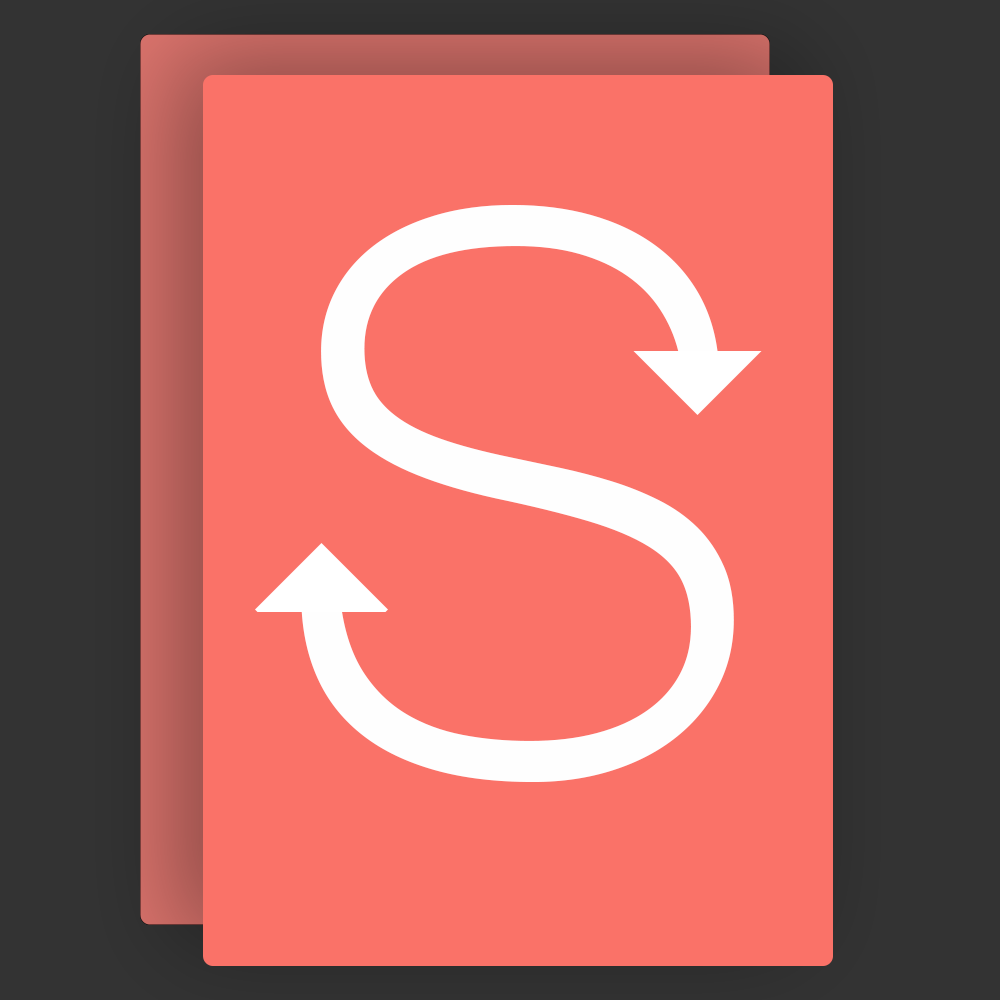
<style>
.page{position:relative;width:1000px;height:1000px;background:#fa7268}
.page>*{position:absolute;margin:0}
.t1{font:1041.7px "Microsoft-Yi-Baiti";color:#fefefe}
</style>
<div class="page">
<p class="t1" style="left:301px;top:205px;width:433px;height:577px">S</p>
</div>
